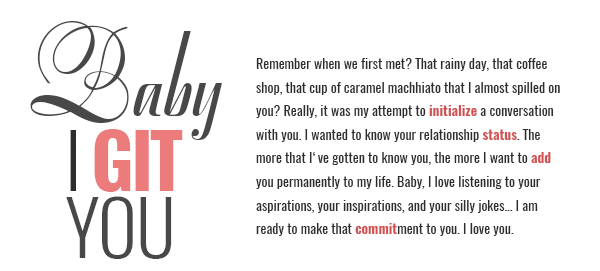
<style>
.page{position:relative;width:600px;height:271px;background:#ffffff}
.page>*{position:absolute;margin:0}
.t1{font:116px "SymphonieCAT";color:#484848}
.t2{font:14px/23.5px "Oswald-Regular";color:#2d2d2d}
.t3{font:14px/23.5px "Oswald-DemiBold";color:#d15252}
.t4{font:74.4px/67.5px "Oswald-Bold";letter-spacing:-0.04em;color:#ec7b7b;text-transform:uppercase}
.t5{font:74.4px/67.5px "Oswald-Light";letter-spacing:-0.04em;color:#2d2d2d;text-transform:uppercase}
.t6{font:74.4px/66.5px "Oswald-Light";letter-spacing:-0.02em;color:#484848;text-transform:uppercase}
</style>
<div class="page">
<p class="t1" style="left:30px;top:21px;width:192px;height:119px">Baby</p>
<p class="t2" style="left:256px;top:58px;width:304px;height:178px">Remember when we first met? That rainy day, that coffee shop, that cup of caramel machhiato that I almost spilled on you? Really, it was my attempt to <span class="t3">initialize</span> a conversation with you. I wanted to know your relationship <span class="t3">status</span>. The more that I‘ve gotten to know you, the more I want to <span class="t3">add</span> you permanently to my life. Baby, I love listening to your aspirations, your inspirations, and your silly jokes... I am ready to make that <span class="t3">commit</span>ment to you. I love you.</p>
<p class="t4" style="left:66px;top:129px;width:117px;height:130px"><span class="t5">I </span>git<br><span class="t6">you</span></p>
</div>
